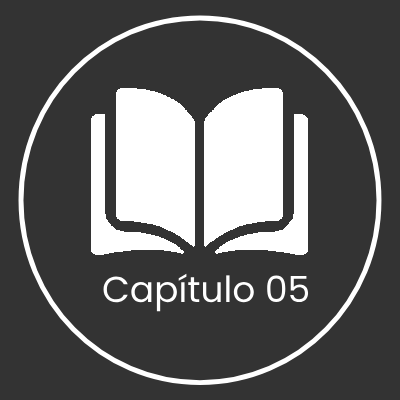
<style>
.page{position:relative;width:400px;height:400px;background:#333333}
.page>*{position:absolute;margin:0}
.t1{font:36px "Poppins-Regular";color:#ffffff}
</style>
<div class="page">
<p class="t1" style="left:103px;top:273px;width:206px;height:39px">Capítulo 05</p>
</div>
